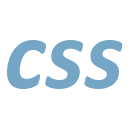
<style>
.page{position:relative;width:128px;height:128px;background:#ffffff}
.page>*{position:absolute;margin:0}
.t1{font:100px "Calibri-BoldItalic";color:#76a6c5}
</style>
<div class="page">
<p class="t1" style="left:7px;top:40px;width:116px;height:49px">css</p>
</div>
